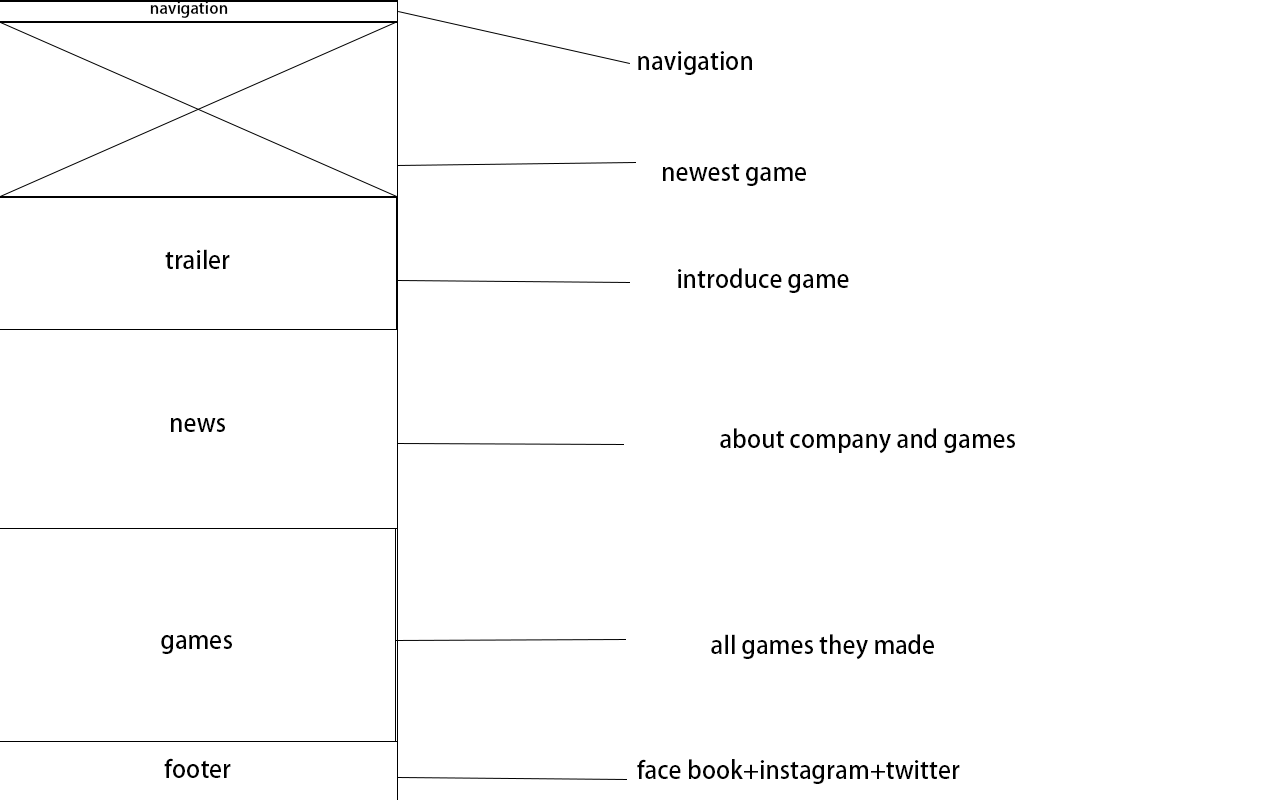
<style>
.page{position:relative;width:1280px;height:800px;background:#ffffff}
.page>*{position:absolute;margin:0}
.t1{font:16px "AdobeFanHeitiStd-Bold";color:#000000}
.t2{font:24px "AdobeFanHeitiStd-Bold";color:#000000}
</style>
<div class="page">
<p class="t1" style="left:150px;top:1px;width:78px;height:17px">navigation</p>
<p class="t2" style="left:638px;top:51px;width:114px;height:24px">navigation</p>
<p class="t2" style="left:663px;top:163px;width:143px;height:23px">newest game</p>
<p class="t2" style="left:165px;top:249px;width:65px;height:20px">trailer</p>
<p class="t2" style="left:678px;top:268px;width:171px;height:25px">introduce game</p>
<p class="t2" style="left:171px;top:418px;width:54px;height:14px">news</p>
<p class="t2" style="left:720px;top:428px;width:295px;height:26px">about company and games</p>
<p class="t2" style="left:161px;top:635px;width:71px;height:19px">games</p>
<p class="t2" style="left:711px;top:634px;width:223px;height:26px">all games they made</p>
<p class="t2" style="left:164px;top:758px;width:67px;height:20px">footer</p>
<p class="t2" style="left:637px;top:759px;width:323px;height:25px">face book+instagram+twitter</p>
</div>
